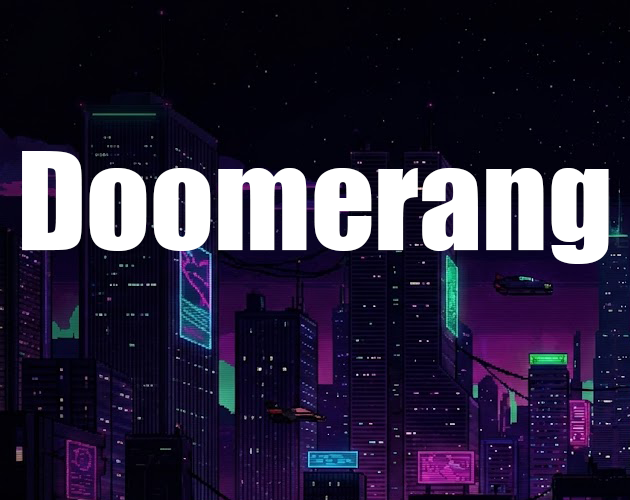
<style>
.page{position:relative;width:630px;height:500px}
.page>*{position:absolute;margin:0}
.t1{font:125px "Impact";color:#ffffff}
</style>
<div class="page">
<p class="t1" style="left:22px;top:151px;width:587px;height:113px">Doomerang</p>
</div>
